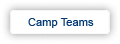
<style>
.page{position:relative;width:120px;height:44px;background:#ffffff}
.page>*{position:absolute;margin:0}
.t1{font:11px "ArialMT";letter-spacing:0.01em;color:#003974}
</style>
<div class="page">
<p class="t1" style="left:28px;top:18px;width:66px;height:10px">Camp Teams</p>
</div>
